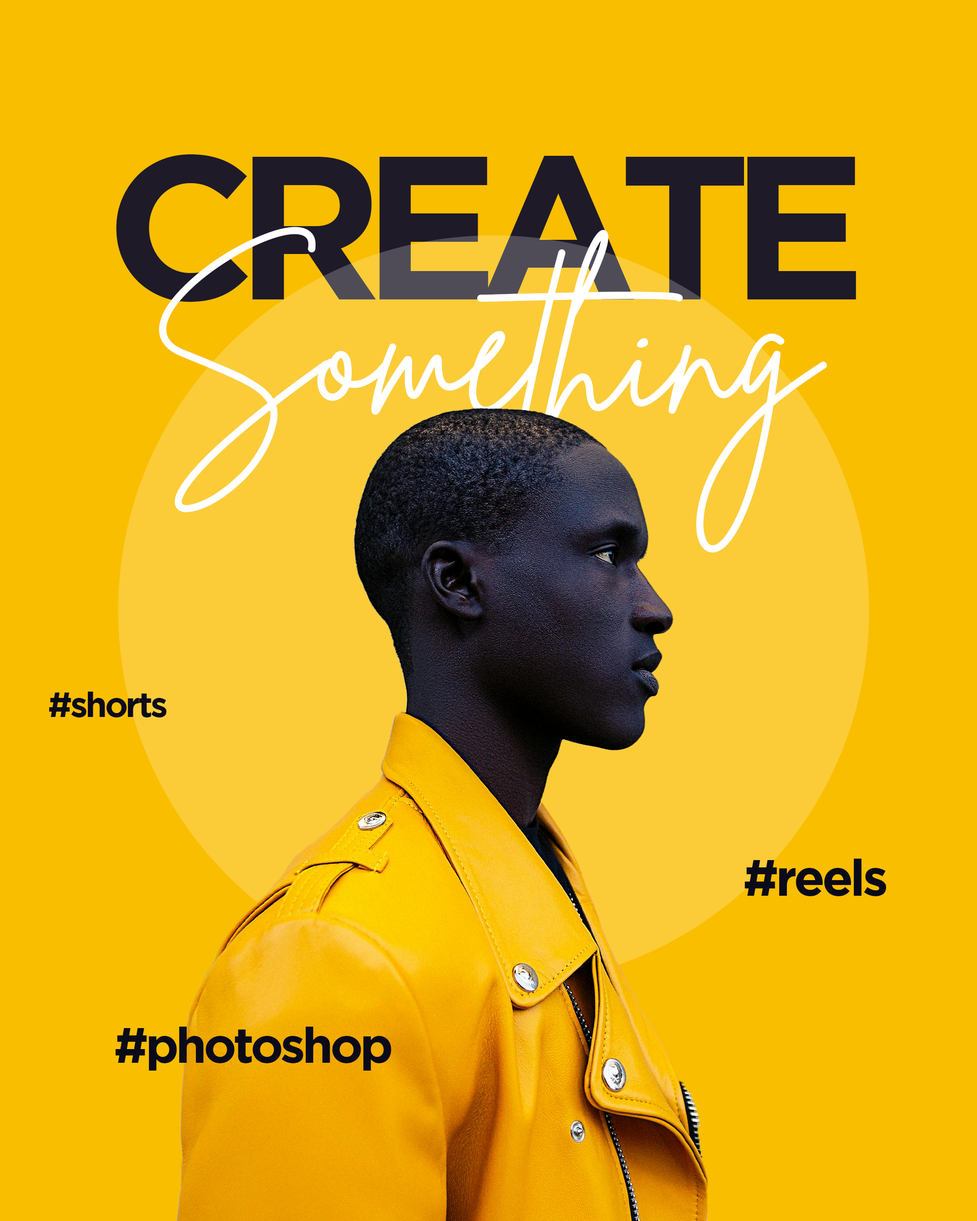
<style>
.page{position:relative;width:977px;height:1221px;background:#fabe00}
.page>*{position:absolute;margin:0}
.t1{font:203.5px "GothamBold";letter-spacing:-0.1em;color:#1e1a28}
.t2{font:183.1px "BrittanySignatureRegular";color:#ffffff}
.t3{font:34.6px "GothamBold";letter-spacing:-0.06em;color:#0b0a19}
.t4{font:50.9px "GothamBold";letter-spacing:-0.06em;color:#0b0a19}
.t5{font:49.3px "GothamBold";letter-spacing:-0.06em;color:#0b0a19}
</style>
<div class="page">
<p class="t1" style="left:116px;top:154px;width:740px;height:148px">CREATE</p>
<p class="t2" style="left:159px;top:227px;width:668px;height:326px;text-align:center">Something</p>
<p class="t3" style="left:49px;top:692px;width:118px;height:25px">#shorts</p>
<p class="t4" style="left:744px;top:859px;width:142px;height:37px">#reels</p>
<p class="t5" style="left:115px;top:1027px;width:276px;height:43px">#photoshop</p>
</div>
